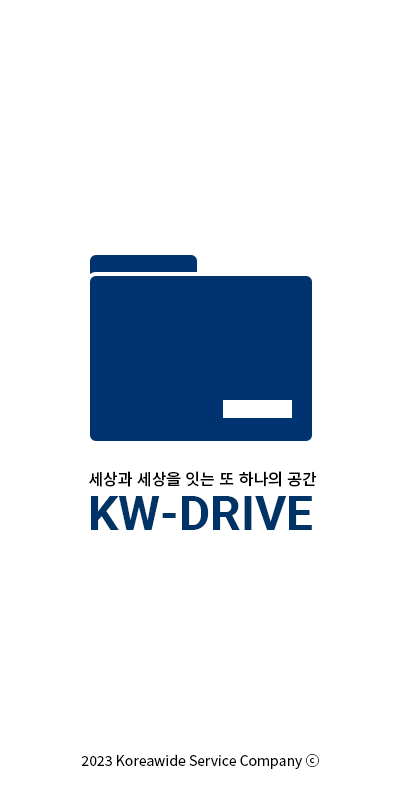
<style>
.page{position:relative;width:401px;height:800px;background:#ffffff}
.page>*{position:absolute;margin:0}
.t1{font:16px "NotoSansKR-Medium";color:#000000}
.t2{font:48px "Roboto-Bold";color:#003366}
.t3{font:14px "NotoSansKR-Regular";color:#000000}
</style>
<div class="page">
<p class="t1" style="left:89px;top:471px;width:228px;height:16px">세상과 세상을 잇는 또 하나의 공간</p>
<p class="t2" style="left:91px;top:496px;width:221px;height:34px">KW-DRIVE</p>
<p class="t3" style="left:81px;top:754px;width:238px;height:15px">2023 Koreawide Service Company ⓒ</p>
</div>
